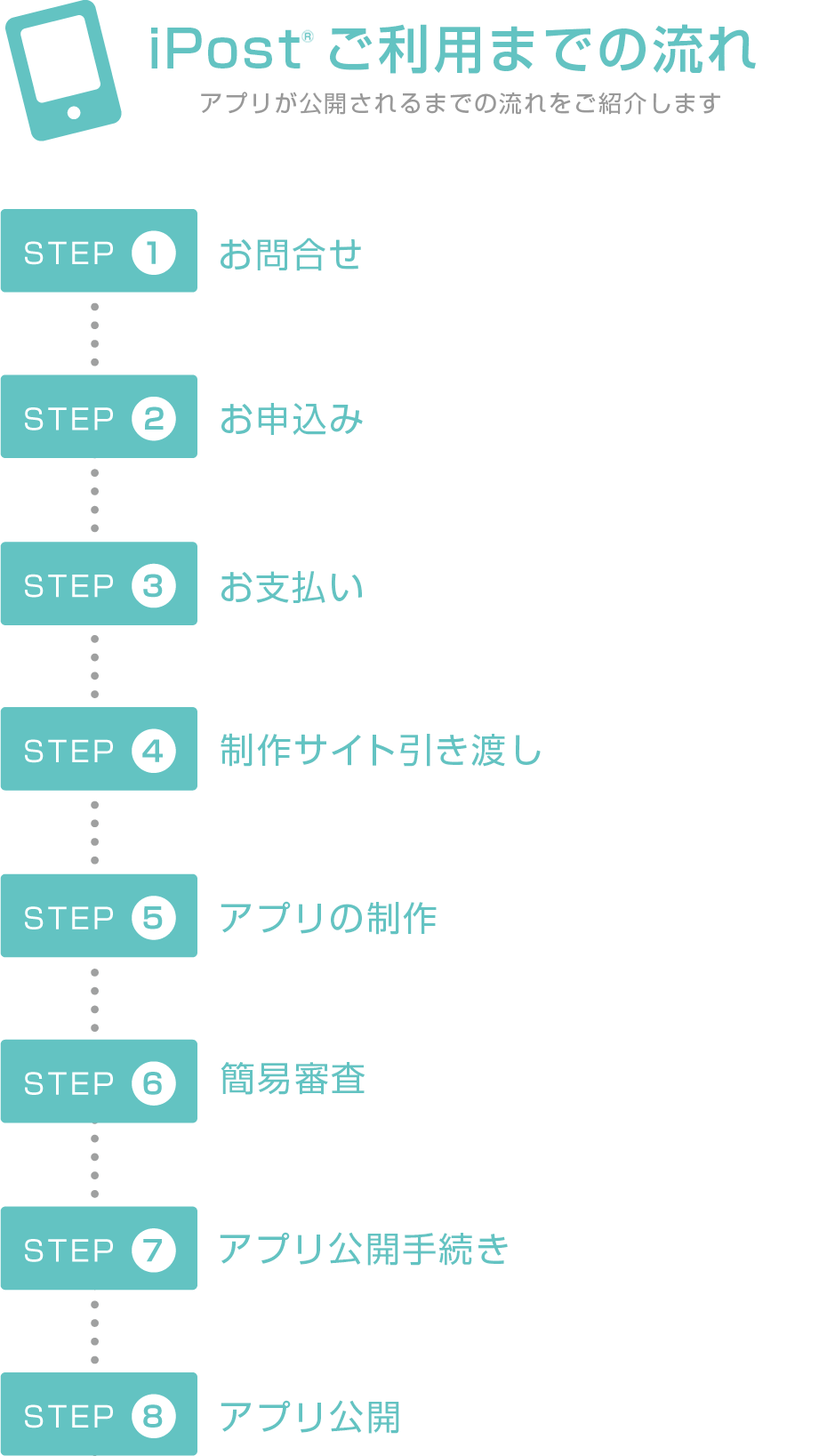
<style>
.page{position:relative;width:819px;height:1456px;background:#ffffff}
.page>*{position:absolute;margin:0}
.t1{font:51.6px "ShinGoPr5-Medium";letter-spacing:0.06em;color:#63c3c2}
.t2{font:23.1px "ShinGoPr5-Regular";letter-spacing:0.08em;color:#999999}
.t3{font:34.7px "ShinGoPr5-Regular";letter-spacing:0.06em;color:#63c3c2}
.t4{font:34.8px "ShinGoPr5-Regular";letter-spacing:0.06em;color:#63c3c2}
.t5{font:34.6px "ShinGoPr5-Regular";letter-spacing:0.06em;color:#63c3c2}
</style>
<div class="page">
<p class="t1" style="left:151px;top:24px;width:605px;height:50px">iPost ご利用までの流れ</p>
<p class="t2" style="left:201px;top:92px;width:519px;height:23px">アプリが公開されるまでの流れをご紹介します</p>
<p class="t3" style="left:221px;top:237px;width:140px;height:34px">お問合せ</p>
<p class="t3" style="left:221px;top:403px;width:142px;height:33px">お申込み</p>
<p class="t3" style="left:221px;top:571px;width:141px;height:32px">お支払い</p>
<p class="t4" style="left:221px;top:733px;width:320px;height:34px">制作サイト引き渡し</p>
<p class="t5" style="left:221px;top:901px;width:216px;height:34px">アプリの制作</p>
<p class="t3" style="left:221px;top:1062px;width:144px;height:33px">簡易審査</p>
<p class="t4" style="left:220px;top:1232px;width:288px;height:34px">アプリ公開手続き</p>
<p class="t4" style="left:221px;top:1400px;width:178px;height:34px">アプリ公開</p>
</div>
